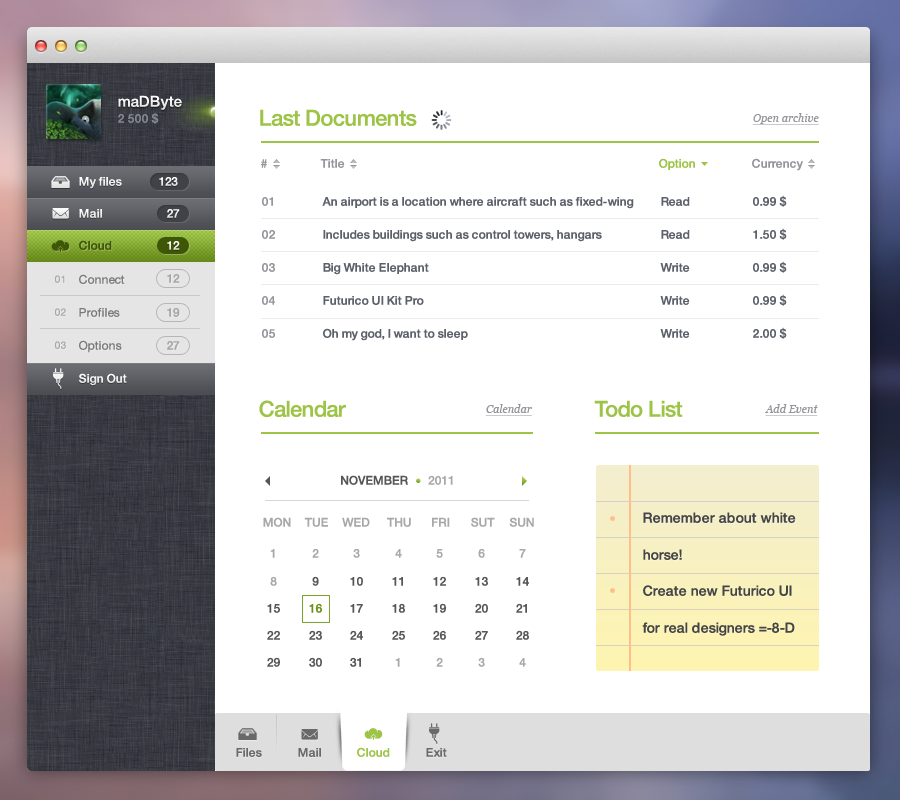
<style>
.page{position:relative;width:900px;height:800px;background:#ffffff}
.page>*{position:absolute;margin:0}
.t1{font:15px "HelveticaNeue-Medium";color:#f1f1f1}
.t2{font:12px "HelveticaNeue-Medium";color:#848892}
.t3{font:22px "HelveticaNeue-Medium";letter-spacing:-0.025em;color:#9dc447}
.t4{font:11px "Georgia-Italic";color:#95969c;text-decoration:underline}
.t5{font:12px "HelveticaNeue-Medium";color:#95969c}
.t6{font:12px "HelveticaNeue-Medium";color:#9dc447}
.t7{font:12px "HelveticaNeue-Medium";color:#f0f0f0}
.t8{font:12px "HelveticaNeue-Medium";letter-spacing:-0.06em;color:#f0f0f0}
.t9{font:12px/33px "HelveticaNeue-Medium";color:#95969c}
.t10{font:12px/33px "HelveticaNeue-Medium";color:#5d606a}
.t11{font:12px "HelveticaNeue-Medium";letter-spacing:-0.06em;color:#f4f4f4}
.t12{font:12px "HelveticaNeue-Medium";color:#3e5706}
.t13{font:12px "HelveticaNeue-Medium";letter-spacing:-0.06em;color:#f5f5f5}
.t14{font:10px/33px "HelveticaNeue";color:#a6a6a6}
.t15{font:12px/33px "HelveticaNeue";color:#797979}
.t16{font:12px "HelveticaNeue-Medium";letter-spacing:-0.06em;color:#a6a6a6}
.t17{font:12px "HelveticaNeue-Medium";color:#f4f4f4}
.t18{font:12px "HelveticaNeue-Medium";color:#565656;text-transform:uppercase}
.t19{font:12px "HelveticaNeue-Medium";color:#a8a8a8;text-transform:uppercase}
.t20{font:14px/37px "HelveticaNeue-Medium";color:#404040}
.t21{font:12px "HelveticaNeue-Medium";color:#6a9113;text-transform:uppercase}
.t22{font:12px "HelveticaNeue-Medium";color:#696969}
</style>
<div class="page">
<p class="t1" style="left:118px;top:95px;width:64px;height:15px">maDByte</p>
<p class="t2" style="left:118px;top:112px;width:41px;height:12px">2 500 $</p>
<p class="t3" style="left:260px;top:109px;width:157px;height:17px">Last Documents</p>
<p class="t4" style="left:752px;top:113px;width:67px;height:12px">Open archive</p>
<p class="t5" style="left:261px;top:159px;width:6px;height:9px">#</p>
<p class="t5" style="left:320px;top:159px;width:25px;height:9px">Title</p>
<p class="t6" style="left:659px;top:158px;width:36px;height:12px">Option</p>
<p class="t5" style="left:752px;top:158px;width:51px;height:13px">Currency</p>
<p class="t7" style="left:79px;top:177px;width:43px;height:12px">My files</p>
<p class="t8" style="left:159px;top:177px;width:19px;height:9px">123</p>
<p class="t9" style="left:262px;top:197px;width:13px;height:141px">01<br>02<br>03<br>04<br>05</p>
<p class="t10" style="left:322px;top:197px;width:312px;height:144px">An airport is a location where aircraft such as fixed-wing<br>Includes buildings such as control towers, hangars<br>Big White Elephant<br>Futurico UI Kit Pro<br>Oh my god, I want to sleep</p>
<p class="t10" style="left:660px;top:197px;width:30px;height:141px">Read<br>Read<br>Write<br>Write<br>Write</p>
<p class="t10" style="left:753px;top:195px;width:34px;height:144px">0.99 $<br>1.50 $<br>0.99 $<br>0.99 $<br>2.00 $</p>
<p class="t7" style="left:79px;top:209px;width:23px;height:9px">Mail</p>
<p class="t11" style="left:167px;top:209px;width:13px;height:9px">27</p>
<p class="t12" style="left:79px;top:240px;width:33px;height:10px">Cloud</p>
<p class="t13" style="left:167px;top:241px;width:13px;height:9px">12</p>
<p class="t14" style="left:55px;top:275px;width:11px;height:74px">01<br>02<br>03</p>
<p class="t15" style="left:79px;top:274px;width:46px;height:79px">Connect<br>Profiles<br>Options</p>
<p class="t16" style="left:167px;top:274px;width:13px;height:9px">12</p>
<p class="t16" style="left:167px;top:308px;width:13px;height:9px">19</p>
<p class="t16" style="left:167px;top:341px;width:13px;height:9px">27</p>
<p class="t17" style="left:79px;top:373px;width:48px;height:13px">Sign Out</p>
<p class="t3" style="left:259px;top:400px;width:87px;height:18px">Calendar</p>
<p class="t3" style="left:594px;top:400px;width:89px;height:17px">Todo List</p>
<p class="t4" style="left:485px;top:404px;width:47px;height:12px">Calendar</p>
<p class="t4" style="left:765px;top:404px;width:53px;height:12px">Add Event</p>
<p class="t18" style="left:341px;top:475px;width:112px;height:10px">november      <span class="t19">2011</span></p>
<p class="t19" style="left:263px;top:517px;width:28px;height:10px">mon</p>
<p class="t19" style="left:304px;top:517px;width:24px;height:10px">tue</p>
<p class="t19" style="left:342px;top:517px;width:28px;height:10px">wed</p>
<p class="t19" style="left:387px;top:517px;width:24px;height:10px">thu</p>
<p class="t19" style="left:432px;top:517px;width:18px;height:10px">fri</p>
<p class="t19" style="left:471px;top:517px;width:24px;height:10px">sut</p>
<p class="t19" style="left:509px;top:517px;width:25px;height:10px">sun</p>
<p class="t20" style="left:643px;top:512px;width:153px;height:48px">Remember about white <br>horse!</p>
<p class="t19" style="left:270px;top:549px;width:5px;height:9px">1</p>
<p class="t19" style="left:312px;top:548px;width:7px;height:10px">2</p>
<p class="t19" style="left:353px;top:548px;width:7px;height:10px">3</p>
<p class="t19" style="left:395px;top:549px;width:7px;height:9px">4</p>
<p class="t19" style="left:436px;top:549px;width:7px;height:9px">5</p>
<p class="t19" style="left:478px;top:548px;width:7px;height:10px">6</p>
<p class="t19" style="left:519px;top:549px;width:7px;height:9px">7</p>
<p class="t19" style="left:270px;top:576px;width:7px;height:10px">8</p>
<p class="t18" style="left:312px;top:576px;width:7px;height:10px">9</p>
<p class="t18" style="left:350px;top:576px;width:13px;height:10px">10</p>
<p class="t18" style="left:392px;top:577px;width:11px;height:9px">11</p>
<p class="t18" style="left:433px;top:576px;width:13px;height:10px">12</p>
<p class="t18" style="left:475px;top:576px;width:13px;height:10px">13</p>
<p class="t18" style="left:516px;top:577px;width:13px;height:9px">14</p>
<p class="t20" style="left:642px;top:585px;width:153px;height:51px">Create new Futurico UI<br>for real designers =-8-D</p>
<p class="t18" style="left:267px;top:604px;width:13px;height:9px">15</p>
<p class="t21" style="left:309px;top:603px;width:13px;height:10px">16</p>
<p class="t18" style="left:350px;top:604px;width:13px;height:9px">17</p>
<p class="t18" style="left:392px;top:603px;width:13px;height:10px">18</p>
<p class="t18" style="left:433px;top:603px;width:13px;height:10px">19</p>
<p class="t18" style="left:475px;top:603px;width:13px;height:10px">20</p>
<p class="t18" style="left:516px;top:603px;width:11px;height:10px">21</p>
<p class="t18" style="left:267px;top:630px;width:13px;height:10px">22</p>
<p class="t18" style="left:309px;top:630px;width:13px;height:10px">23</p>
<p class="t18" style="left:350px;top:630px;width:13px;height:10px">24</p>
<p class="t18" style="left:392px;top:630px;width:13px;height:10px">25</p>
<p class="t18" style="left:433px;top:630px;width:13px;height:10px">26</p>
<p class="t18" style="left:475px;top:630px;width:13px;height:10px">27</p>
<p class="t18" style="left:516px;top:630px;width:13px;height:10px">28</p>
<p class="t18" style="left:267px;top:657px;width:13px;height:10px">29</p>
<p class="t18" style="left:309px;top:657px;width:13px;height:10px">30</p>
<p class="t18" style="left:350px;top:657px;width:11px;height:10px">31</p>
<p class="t19" style="left:395px;top:658px;width:5px;height:9px">1</p>
<p class="t19" style="left:436px;top:657px;width:7px;height:10px">2</p>
<p class="t19" style="left:478px;top:657px;width:7px;height:10px">3</p>
<p class="t19" style="left:519px;top:658px;width:7px;height:9px">4</p>
<p class="t22" style="left:236px;top:748px;width:26px;height:9px">Files</p>
<p class="t22" style="left:298px;top:748px;width:23px;height:9px">Mail</p>
<p class="t6" style="left:357px;top:747px;width:33px;height:10px">Cloud</p>
<p class="t22" style="left:426px;top:748px;width:21px;height:9px">Exit</p>
</div>
